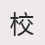
<style>
.page{position:relative;width:45px;height:45px;background:#eeeaea}
.page>*{position:absolute;margin:0}
.t1{font:24px "MicrosoftYaHei";color:#2c2c2c}
</style>
<div class="page">
<p class="t1" style="left:10px;top:12px;width:24px;height:24px">校</p>
</div>
